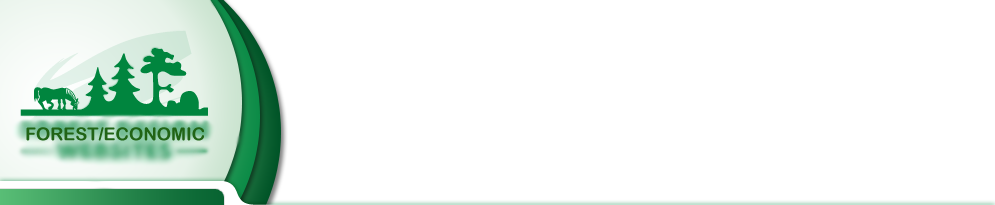
<style>
.page{position:relative;width:995px;height:205px;background:#ffffff}
.page>*{position:absolute;margin:0}
.t1{font:18px "ArialRoundedMTBold";color:#216416}
</style>
<div class="page">
<p class="t1" style="left:26px;top:127px;width:178px;height:14px">FOREST/ECONOMIC</p>
</div>
